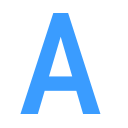
<style>
.page{position:relative;width:128px;height:128px;background:#ffffff}
.page>*{position:absolute;margin:0}
.t1{font:142.3px "RobotoMono-Medium";color:#3a9cff}
</style>
<div class="page">
<p class="t1" style="left:20px;top:13px;width:81px;height:101px">A</p>
</div>
